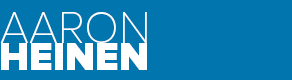
<style>
.page{position:relative;width:292px;height:80px;background:#0075ae}
.page>*{position:absolute;margin:0}
.t1{font:45.4px "ProximaNovaT-Thin";color:#ffffff}
.t2{font:40px "ProximaNova-Black";color:#ffffff}
</style>
<div class="page">
<p class="t1" style="left:0px;top:12px;width:147px;height:31px">AARON</p>
<p class="t2" style="left:1px;top:43px;width:146px;height:27px">HEINEN</p>
</div>
